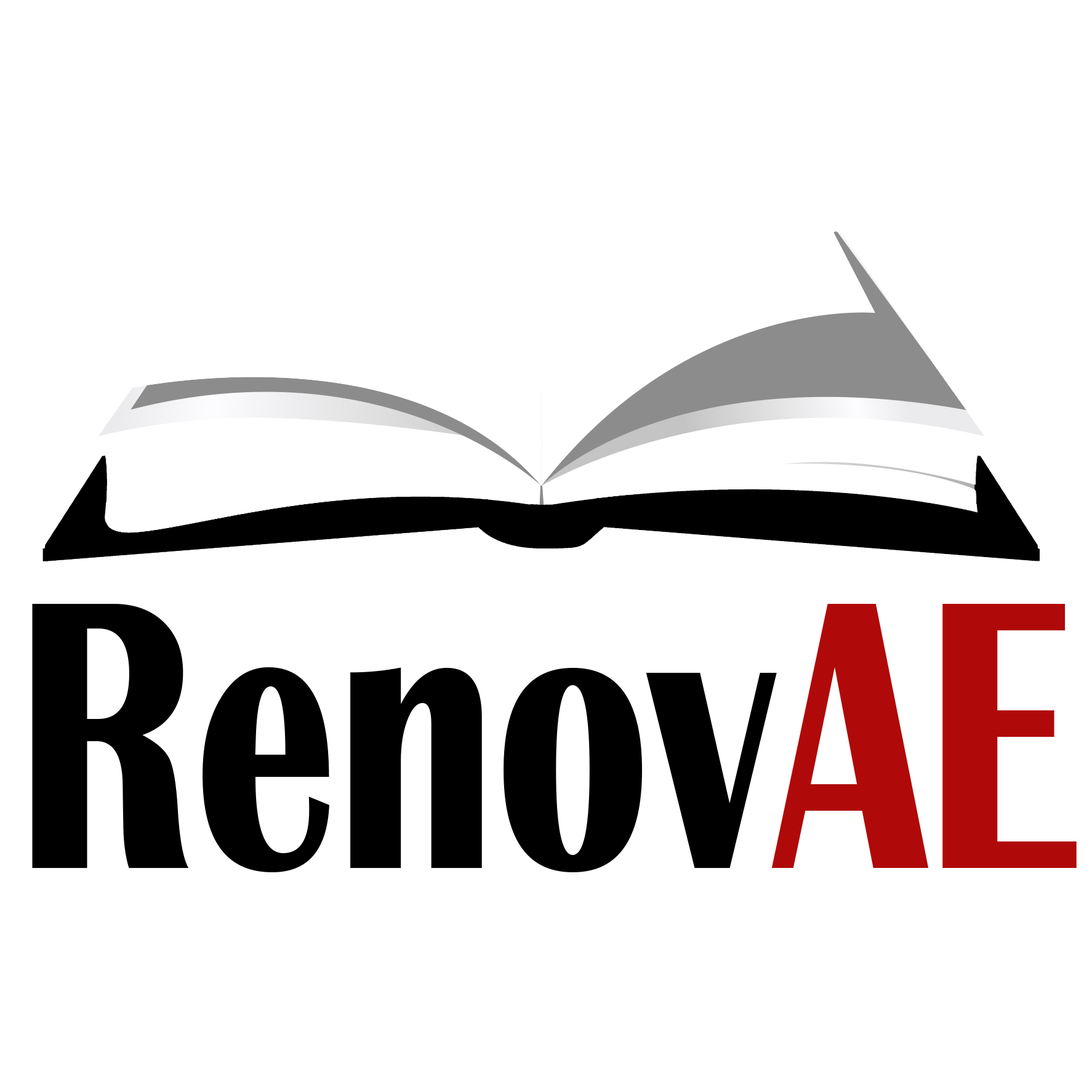
<style>
.page{position:relative;width:1092px;height:1092px;background:#ffffff}
.page>*{position:absolute;margin:0}
.t1{font:396.4px "BritannicBold";color:#000000;scale:0.71 1}
.t2{font:396.4px "BritannicBold";color:#b00909;scale:0.71 1}
</style>
<div class="page">
<p class="t1" style="left:32px;top:604px;width:1045px;height:268px">Renov<span class="t2">AE</span></p>
</div>
